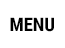
<style>
.page{position:relative;width:65px;height:48px;background:#ffffff}
.page>*{position:absolute;margin:0}
.t1{font:18.7px "RobotoCondensed-Bold";color:#000000}
</style>
<div class="page">
<p class="t1" style="left:10px;top:17px;width:44px;height:15px">MENU</p>
</div>
